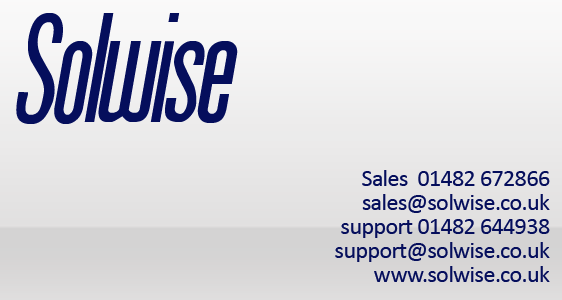
<style>
.page{position:relative;width:562px;height:300px}
.page>*{position:absolute;margin:0}
.t1{font:150px "Arizona";letter-spacing:-0.025em;color:#050e5c;font-style:italic}
.t2{font:24px/24px "Calibri";letter-spacing:-0.025em;color:#050e5c}
</style>
<div class="page">
<p class="t1" style="left:16px;top:13px;width:222px;height:111px">Solwise</p>
<p class="t2" style="left:335px;top:170px;width:215px;height:112px;text-align:right">Sales  01482 672866<br>sales@solwise.co.uk<br>support 01482 644938<br>support@solwise.co.uk<br>www.solwise.co.uk</p>
</div>
